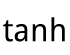
<style>
.page{position:relative;width:70px;height:55px;background:#ffffff}
.page>*{position:absolute;margin:0}
.t1{font:31.8px "DroidSans";color:#000000}
</style>
<div class="page">
<p class="t1" style="left:3px;top:17px;width:62px;height:25px">tanh</p>
</div>
